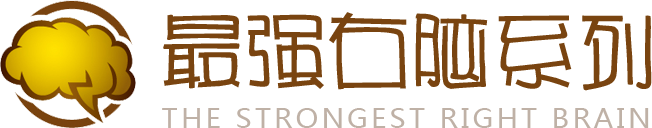
<style>
.page{position:relative;width:652px;height:128px;background:#ffffff}
.page>*{position:absolute;margin:0}
.t1{font:82.3px "HYr2gj";color:#794410}
.t2{font:27.4px "MicrosoftYaHei";letter-spacing:0.12em;color:#bfb1a6;text-transform:uppercase}
</style>
<div class="page">
<p class="t1" style="left:163px;top:12px;width:489px;height:79px">最强右脑系列</p>
<p class="t2" style="left:162px;top:108px;width:487px;height:20px">the Strongest right brain</p>
</div>
